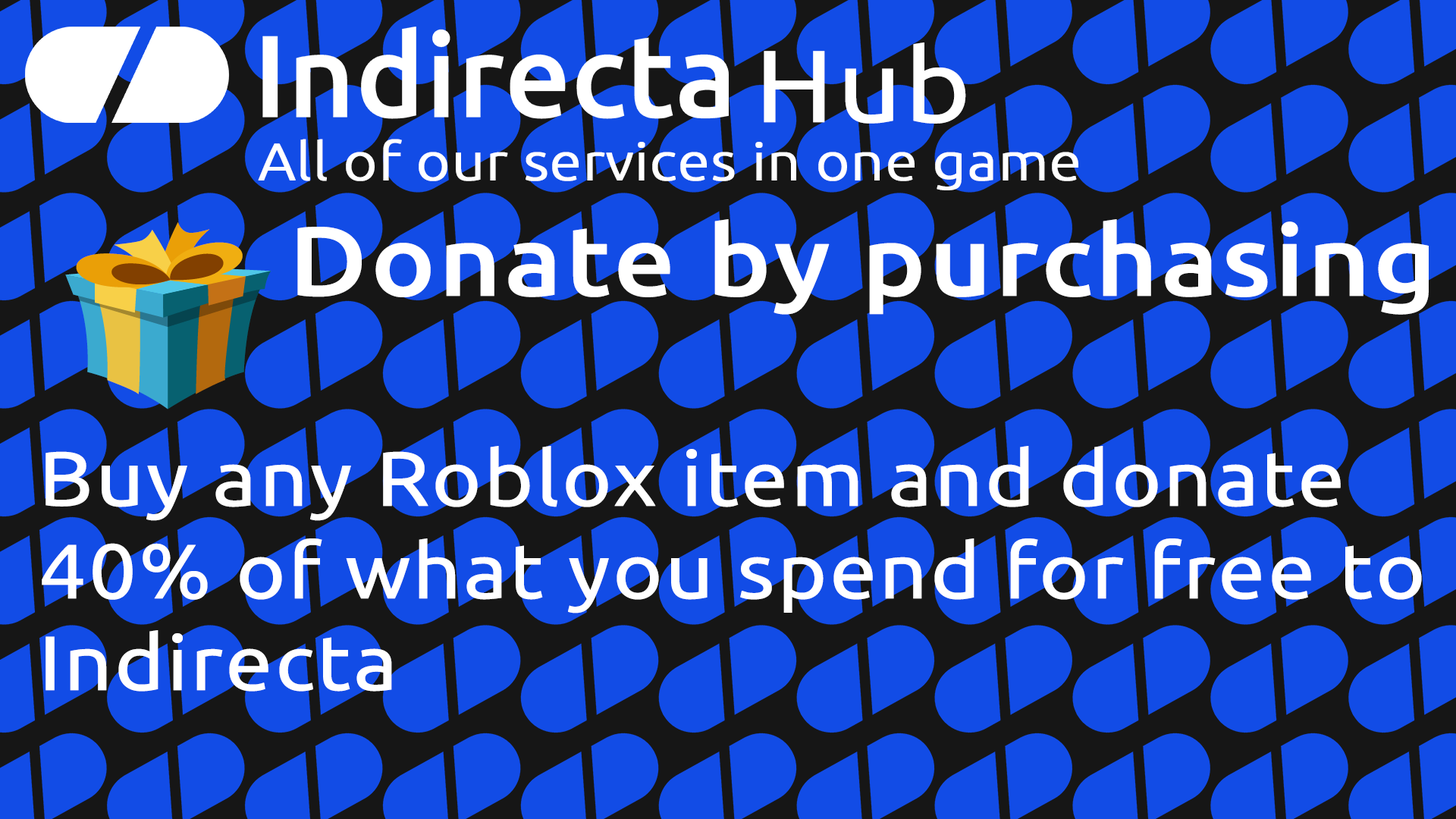
<style>
.page{position:relative;width:1456px;height:819px;background:#124ce6}
.page>*{position:absolute;margin:0}
.t1{font:102.4px "Ubuntu-Regular";color:#ffffff;font-weight:bold;scale:1.1 1}
.t2{font:52.3px "Ubuntu-Light";color:#ffffff;font-weight:bold;scale:1.1 1}
.t3{font:98.4px "Ubuntu-Medium";color:#ffffff;font-weight:bold;scale:1.1 1}
.t4{font:77px "Ubuntu-Regular";color:#ffffff;font-weight:bold;scale:1.1 1}
</style>
<div class="page">
<p class="t1" style="left:764px;top:42px;width:202px;height:82px">Hub</p>
<p class="t2" style="left:258px;top:139px;width:820px;height:51px">All of our services in one game</p>
<p class="t3" style="left:297px;top:219px;width:1132px;height:96px">Donate by purchasing</p>
<p class="t4" style="left:42px;top:446px;width:1380px;height:246px">Buy any Roblox item and donate<br>40% of what you spend for free to<br>Indirecta</p>
</div>
